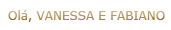
<style>
.page{position:relative;width:171px;height:30px;background:#ffffff}
.page>*{position:absolute;margin:0}
.t1{font:12px "Verdana"}
</style>
<div class="page">
<p class="t1" style="left:8px;top:10px;width:157px;height:12px">Olá, VANESSA E FABIANO</p>
</div>
